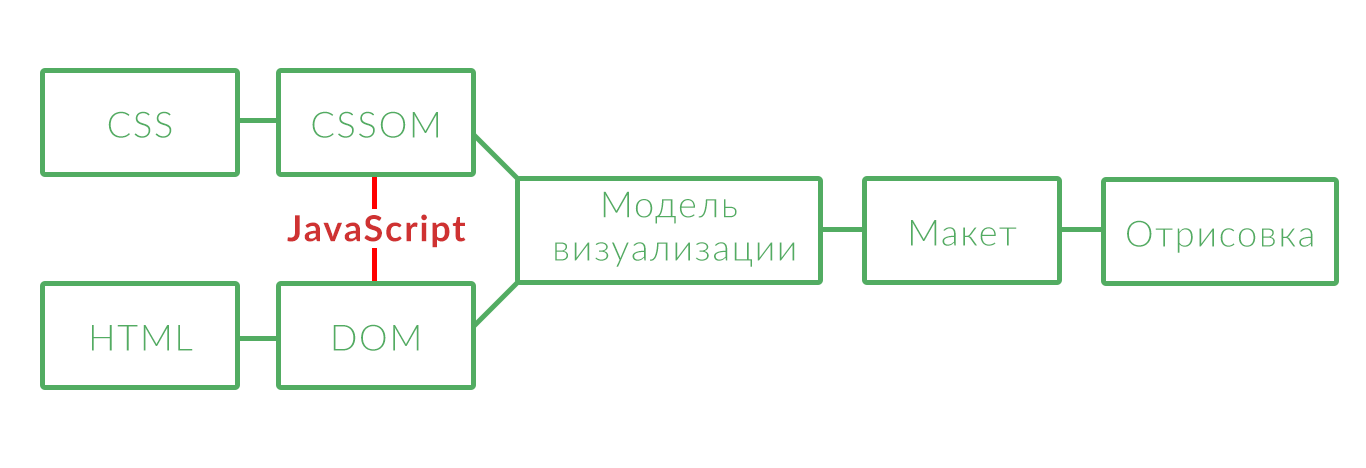
<style>
.page{position:relative;width:1366px;height:468px;background:#ffffff}
.page>*{position:absolute;margin:0}
.t1{font:36px "Lato-Light";letter-spacing:0.05em;color:#52ac62}
.t2{font:36px "Lato-Bold";letter-spacing:0.05em;color:#cf3232}
</style>
<div class="page">
<p class="t1" style="left:108px;top:111px;width:64px;height:27px">CSS</p>
<p class="t1" style="left:312px;top:111px;width:126px;height:27px">CSSOM</p>
<p class="t1" style="left:555px;top:191px;width:240px;height:76px;text-align:center">Модель<br> визуализации</p>
<p class="t2" style="left:287px;top:214px;width:179px;height:34px">JavaScript</p>
<p class="t1" style="left:911px;top:220px;width:106px;height:26px">Макет</p>
<p class="t1" style="left:1127px;top:220px;width:186px;height:33px">Отрисовка</p>
<p class="t1" style="left:92px;top:325px;width:101px;height:26px">HTML</p>
<p class="t1" style="left:333px;top:324px;width:86px;height:27px">DOM</p>
</div>
